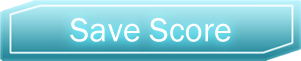
<style>
.page{position:relative;width:301px;height:61px}
.page>*{position:absolute;margin:0}
.t1{font:34.3px "FranklinGothic-Book";color:#fffefe}
</style>
<div class="page">
<p class="t1" style="left:70px;top:18px;width:161px;height:24px">Save Score</p>
</div>
